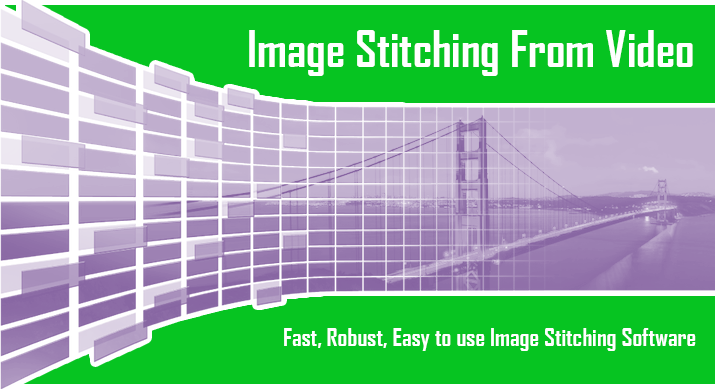
<style>
.page{position:relative;width:720px;height:389px;background:#06c421}
.page>*{position:absolute;margin:0}
.t1{font:48px "AgencyFB-Bold";color:#ffffff}
.t2{font:24px "AgencyFB-Bold";color:#ffffff}
</style>
<div class="page">
<p class="t1" style="left:249px;top:30px;width:444px;height:46px">Image Stitching From Video</p>
<p class="t2" style="left:284px;top:328px;width:412px;height:23px">Fast, Robust, Easy to use Image Stitching Software</p>
</div>
